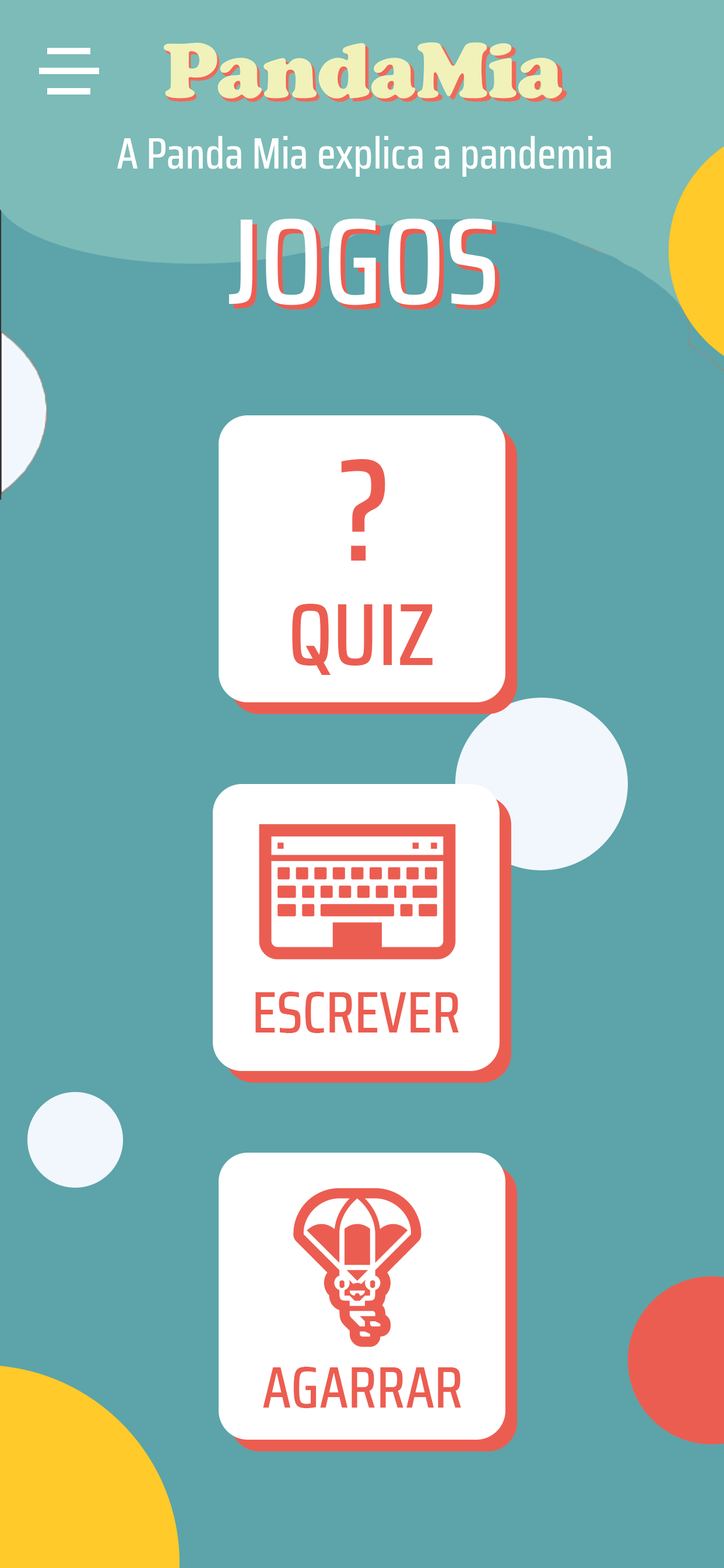
<style>
.page{position:relative;width:724px;height:1568px;background:#5ca4a9}
.page>*{position:absolute;margin:0}
.t1{font:122.5px "SairaCondensed-Medium";color:#ffffff}
.t2{font:122.5px "SairaCondensed-Medium"}
.t3{font:145.8px "SairaCondensed-Medium";color:#ec5d51}
.t4{font:87.5px "SairaCondensed-Medium";color:#ec5d51}
.t5{font:58.3px "SairaCondensed-Medium";color:#ec5d51}
</style>
<div class="page">
<p class="t1" style="left:229px;top:218px;width:267px;height:87px">JOGOS</p>
<p class="t2" style="left:233px;top:223px;width:268px;height:87px">JOGOS</p>
<p class="t3" style="left:341px;top:459px;width:45px;height:102px">?</p>
<p class="t4" style="left:292px;top:604px;width:141px;height:71px">QUIZ</p>
<p class="t5" style="left:256px;top:992px;width:203px;height:41px">ESCREVER</p>
<p class="t5" style="left:263px;top:1367px;width:198px;height:41px">AGARRAR</p>
</div>
